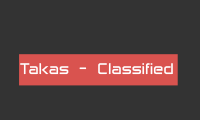
<style>
.page{position:relative;width:200px;height:120px;background:#333333}
.page>*{position:absolute;margin:0}
.t1{font:15px "Anita--Semi-square";color:#ffffff}
</style>
<div class="page">
<p class="t1" style="left:20px;top:63px;width:153px;height:12px">Takas - Classified</p>
</div>
